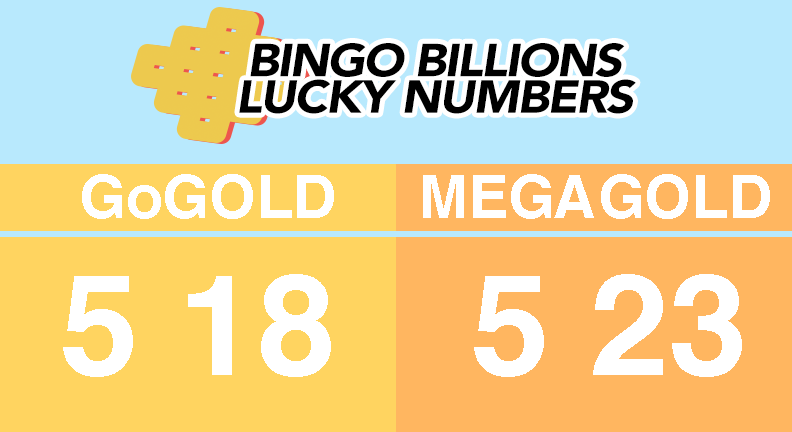
<style>
.page{position:relative;width:792px;height:432px;background:#b8e9fd}
.page>*{position:absolute;margin:0}
.t1{font:45.8px/36.6px "Avenir-BlackOblique";letter-spacing:-0.04em;color:#000000;scale:1.07 1}
.t2{font:60px "Helvetica-Bold";color:#ffffff}
.t3{font:142px "Helvetica-Bold";color:#ffffff}
</style>
<div class="page">
<p class="t1" style="left:239px;top:43px;width:397px;height:71px;text-align:center">BINGO BILLIONS<br>LUCKY NUMBERS</p>
<p class="t2" style="left:82px;top:174px;width:252px;height:45px">GoGOLD</p>
<p class="t2" style="left:423px;top:174px;width:347px;height:45px">MEGAGOLD</p>
<p class="t3" style="left:63px;top:274px;width:268px;height:103px">5 18</p>
<p class="t3" style="left:474px;top:274px;width:268px;height:103px">5 23</p>
</div>
